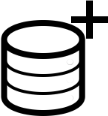
<style>
.page{position:relative;width:108px;height:116px;background:#ffffff}
.page>*{position:absolute;margin:0}
.t1{font:72px "MyriadPro-Bold";color:#000000}
</style>
<div class="page">
<p class="t1" style="left:71px;top:0px;width:37px;height:39px">+</p>
</div>
